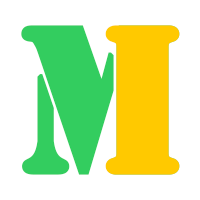
<style>
.page{position:relative;width:200px;height:200px;background:#ffffff}
.page>*{position:absolute;margin:0}
.t1{font:192px "StencilStd";font-weight:bold}
.t2{font:192px "StencilStd";color:#ffc900;font-weight:bold}
</style>
<div class="page">
<p class="t1" style="left:21px;top:25px;width:159px;height:150px">M</p>
<p class="t2" style="left:105px;top:25px;width:75px;height:150px">I</p>
</div>
